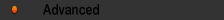
<style>
.page{position:relative;width:224px;height:20px;background:#333333}
.page>*{position:absolute;margin:0}
.t1{font:14.9px "ArialRoundedMTBold";color:#030303;scale:0.78 1}
</style>
<div class="page">
<p class="t1" style="left:43px;top:4px;width:56px;height:11px">Advanced</p>
</div>
